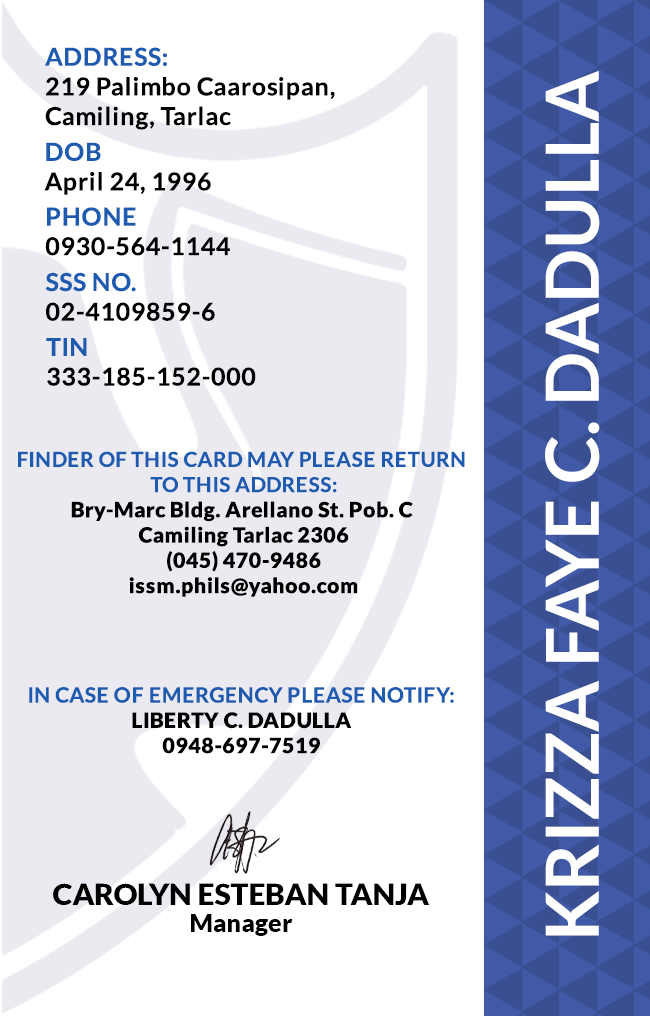
<style>
.page{position:relative;width:650px;height:1016px;background:#ffffff}
.page>*{position:absolute;margin:0}
.t1{font:24.7px/29.6px "Lato-Bold";letter-spacing:0.025em;color:#000000}
.t2{font:72.9px "Lato-Bold";color:#ffffff}
.t3{font:24.7px/29.6px "Lato-Bold";letter-spacing:0.025em}
.t4{font:21.1px "Lato-Black";letter-spacing:0.025em}
.t5{font:20.5px/25.3px "Lato-Bold";letter-spacing:0.025em;text-transform:uppercase}
.t6{font:21.1px/25.3px "Lato-Bold";letter-spacing:0.025em}
.t7{font:29.5px "Lato-Black";color:#000000}
.t8{font:25px "Lato-Black";color:#000000}
</style>
<div class="page">
<p class="t1" style="left:45px;top:47px;width:290px;height:83px">ADDRESS:<br>219 Palimbo Caarosipan,<br>Camiling, Tarlac</p>
<p class="t2" style="left:545px;top:70px;width:55px;height:866px;rotate:-90deg">KRIZZA FAYE C. DADULLA</p>
<p class="t3" style="left:44px;top:142px;width:167px;height:53px">DOB<br>April 24, 1996</p>
<p class="t3" style="left:45px;top:207px;width:185px;height:49px">PHONE <br>0930-564-1144</p>
<p class="t3" style="left:45px;top:272px;width:170px;height:49px">SSS NO.<br>02-4109859-6</p>
<p class="t1" style="left:46px;top:338px;width:210px;height:48px">TIN<br>333-185-152-000</p>
<p class="t4" style="left:18px;top:451px;width:447px;height:146px;text-align:center"><span class="t5">Finder of this card may please return <br>to this address:<br></span>Bry-Marc Bldg. Arellano St. Pob. C <br>Camiling Tarlac 2306<br>(045) 470-9486<br>issm.phils@yahoo.com</p>
<p class="t6" style="left:29px;top:687px;width:425px;height:67px;text-align:center">IN CASE OF EMERGENCY PLEASE NOTIFY:<br><span class="t4">LIBERTY C. DADULLA<br>0948-697-7519</span></p>
<p class="t7" style="left:53px;top:883px;width:376px;height:22px">CAROLYN ESTEBAN TANJA</p>
<p class="t8" style="left:191px;top:914px;width:102px;height:22px">Manager</p>
</div>
